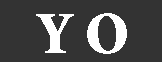
<style>
.page{position:relative;width:162px;height:62px;background:#333333}
.page>*{position:absolute;margin:0}
.t1{font:60px "MinionStd-Black";color:#ffffff}
</style>
<div class="page">
<p class="t1" style="left:36px;top:13px;width:91px;height:41px">Y O</p>
</div>
